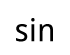
<style>
.page{position:relative;width:70px;height:55px;background:#ffffff}
.page>*{position:absolute;margin:0}
.t1{font:31.8px "DroidSans";color:#000000}
</style>
<div class="page">
<p class="t1" style="left:16px;top:18px;width:37px;height:24px">sin</p>
</div>
